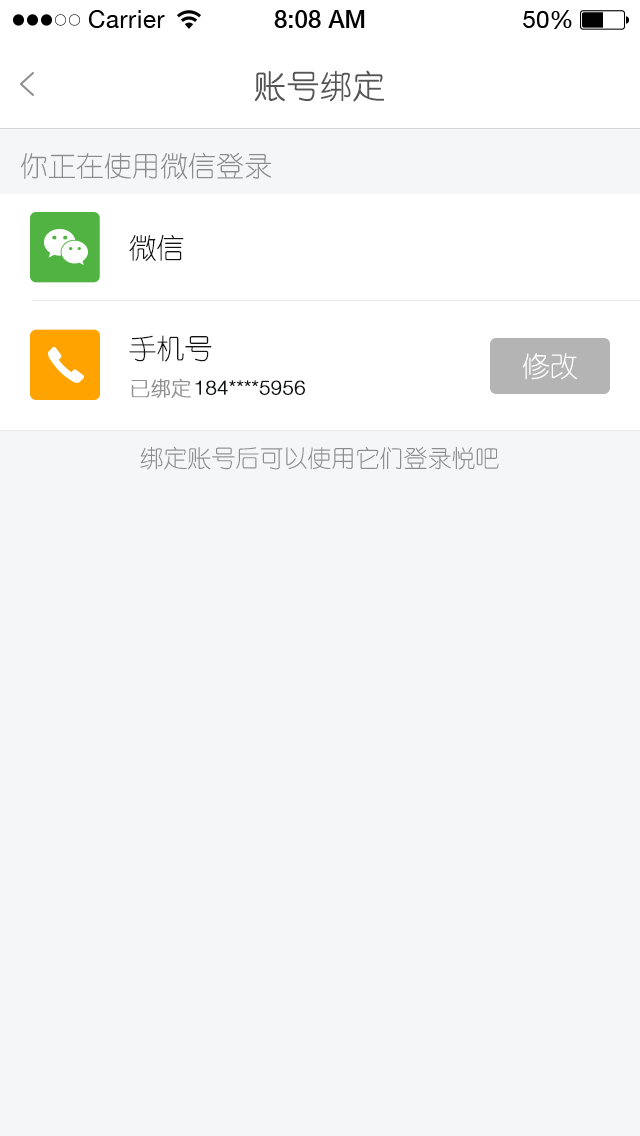
<style>
.page{position:relative;width:640px;height:1136px;background:#f5f6f7}
.page>*{position:absolute;margin:0}
.t1{font:32px "YouYuan";color:#555555;text-transform:uppercase;font-weight:bold}
.t2{font:28px "YouYuan";color:#8b8c8d}
.t3{font:28px "YouYuan";color:#121414}
.t4{font:28px "YouYuan";color:#ffffff;text-transform:uppercase}
.t5{font:20px "YouYuan";color:#919191;font-weight:bold}
.t6{font:20px "HelveticaNeueLTPro-Lt";color:#121414;font-weight:bold}
.t7{font:24px "YouYuan";color:#8b8c8d}
</style>
<div class="page">
<p class="t1" style="left:255px;top:70px;width:129px;height:32px">账号绑定</p>
<p class="t2" style="left:20px;top:152px;width:251px;height:27px">你正在使用微信登录</p>
<p class="t3" style="left:129px;top:234px;width:55px;height:27px">微信</p>
<p class="t3" style="left:129px;top:335px;width:83px;height:27px">手机号</p>
<p class="t4" style="left:522px;top:353px;width:55px;height:27px">修改</p>
<p class="t5" style="left:131px;top:378px;width:60px;height:20px">已绑定</p>
<p class="t6" style="left:195px;top:380px;width:110px;height:15px">184****5956</p>
<p class="t7" style="left:140px;top:446px;width:359px;height:24px">绑定账号后可以使用它们登录悦吧</p>
</div>
